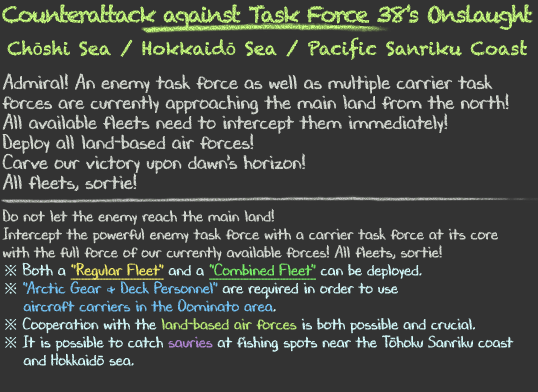
<style>
.page{position:relative;width:538px;height:392px;background:#333333}
.page>*{position:absolute;margin:0}
.t1{font:22px/36px "Chalkduster";letter-spacing:-0.085em}
.t2{font:18px/36px "Chalkduster"}
.t3{font:18px/36px "MyriadPro-Regular"}
.t4{font:20px/20px "DJBChalkItUp";color:#d9ded6}
.t5{font:16px/18px "DJBChalkItUp";color:#d9ded6}
.t6{font:16px/18px "TimesNewRomanPSMT";color:#d7feff}
.t7{font:16px/18px "DJBChalkItUp";color:#d7feff}
.t8{font:16px/18px "DJBChalkItUp";color:#f5ed68;text-decoration:underline}
.t9{font:16px/18px "DJBChalkItUp";color:#7bf26b;text-decoration:underline}
.t10{font:16px/18px "DJBChalkItUp";color:#76c8fb}
.t11{font:16px/18px "DJBChalkItUp";color:#bdef78}
.t12{font:16px/18px "DJBChalkItUp";color:#b489d6}
</style>
<div class="page">
<p class="t1" style="left:2px;top:4px;width:531px;height:56px;text-align:center">Counterattack against Task Force 38's Onslaught<br><span class="t2">Ch</span><span class="t3">ō</span><span class="t2">shi Sea / Hokkaid</span><span class="t3">ō</span><span class="t2"> Sea / Pacific Sanriku Coast</span></p>
<p class="t4" style="left:2px;top:73px;width:512px;height:293px">Admiral! An enemy task force as well as multiple carrier task<br>forces are currently approaching the main land from the north!<br>All available fleets need to intercept them immediately!<br>Deploy all land-based air forces!<br>Carve our victory upon dawn's horizon!<br>All fleets, sortie!<br><br><span class="t5">Do not let the enemy reach the main land!<br>Intercept the powerful enemy task force with a carrier task force at its core<br>with the full force of our currently available forces! All fleets, sortie!<br></span><span class="t6">※ </span><span class="t7">Both a </span><span class="t8">"Regular Fleet"</span><span class="t7"> and a </span><span class="t9">"Combined Fleet"</span><span class="t7"> can be deployed.<br></span><span class="t6">※ </span><span class="t10">"Arctic Gear &amp; Deck Personnel"</span><span class="t7"> are required in order to use<br>　 </span><span class="t10">aircraft carriers in the Oominato area</span><span class="t7">.<br></span><span class="t6">※ </span><span class="t7">Cooperation with the </span><span class="t11">land-based air forces</span><span class="t7"> is both possible and crucial.<br></span><span class="t6">※ </span><span class="t7">It is possible to catch </span><span class="t12">sauries</span><span class="t7"> at fishing spots near the Tōhoku Sanriku coast<br>　 and Hokkaidō sea.</span></p>
</div>
